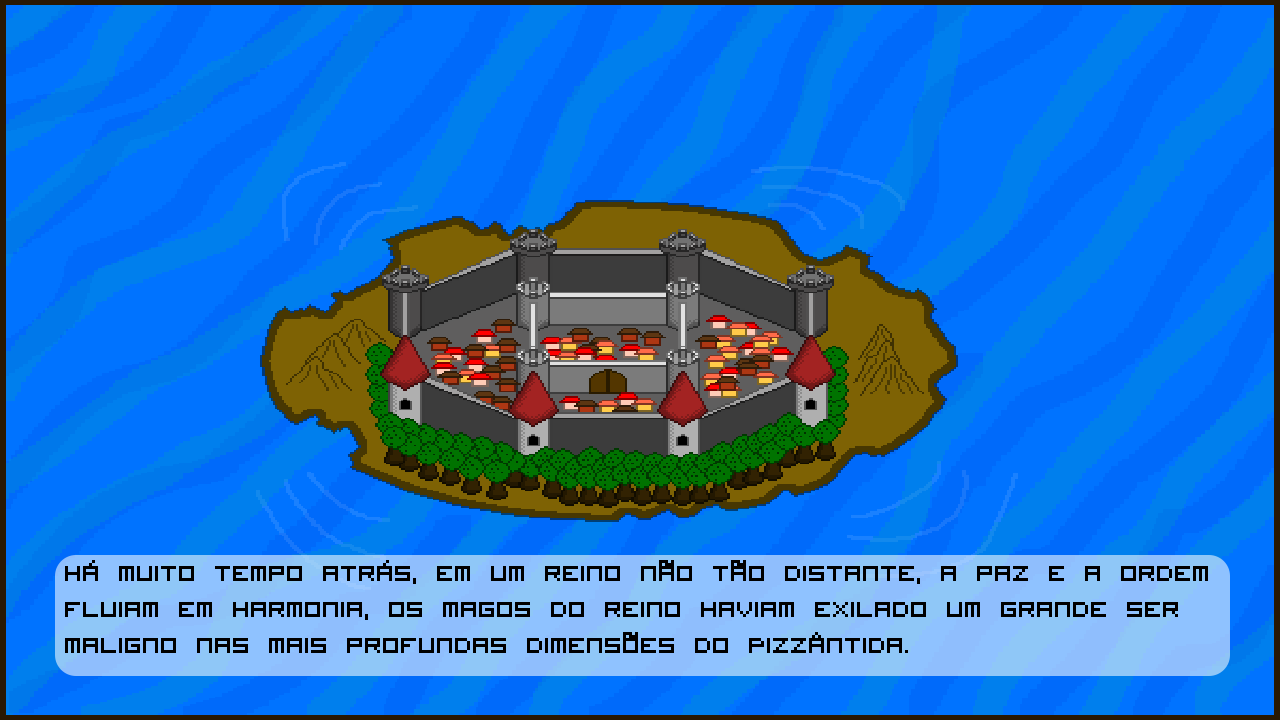
<style>
.page{position:relative;width:1280px;height:720px;background:#0073ff}
.page>*{position:absolute;margin:0}
.t1{font:30px "VisitorTT1BRK";color:#000000}
</style>
<div class="page">
<p class="t1" style="left:65px;top:560px;width:1143px;height:93px">Há muito tempo atrás, em um reino não tão distante, a paz e a ordem fluiam em harmonia, os magos do reino haviam exilado um grande ser maligno nas mais profundas dimensões do Pizzântida.</p>
</div>
